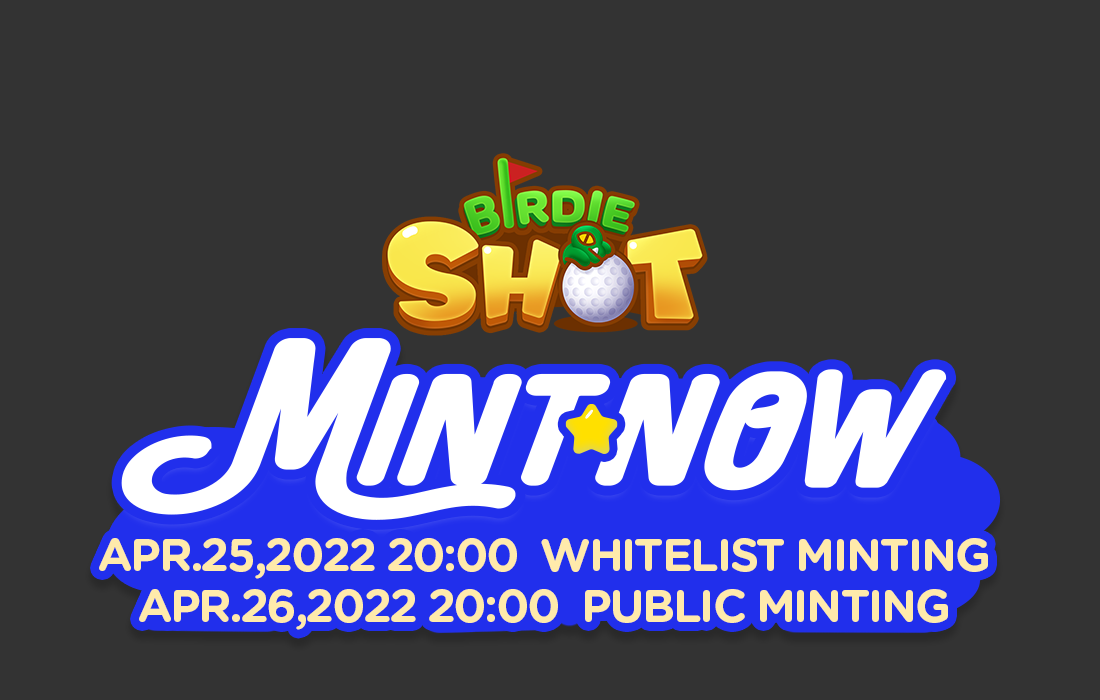
<style>
.page{position:relative;width:1100px;height:700px;background:#333333}
.page>*{position:absolute;margin:0}
.t1{font:46px/50.4px "GothamRounded-Bold";letter-spacing:-0.05em;color:#ffeaab}
</style>
<div class="page">
<p class="t1" style="left:99px;top:538px;width:889px;height:92px;text-align:center">APR.25,2022 20:00  WHITELIST MINTING<br>APR.26,2022 20:00  PUBLIC MINTING</p>
</div>
